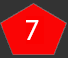
<style>
.page{position:relative;width:68px;height:58px;background:#fa0505}
.page>*{position:absolute;margin:0}
.t1{font:30px "MyriadPro-Regular";color:#ffffff}
</style>
<div class="page">
<p class="t1" style="left:26px;top:20px;width:13px;height:20px">7</p>
</div>
